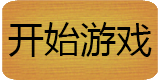
<style>
.page{position:relative;width:160px;height:80px}
.page>*{position:absolute;margin:0}
.t1{font:36px "MicrosoftYaHei";color:#000000}
</style>
<div class="page">
<p class="t1" style="left:8px;top:22px;width:144px;height:35px">开始游戏</p>
</div>
